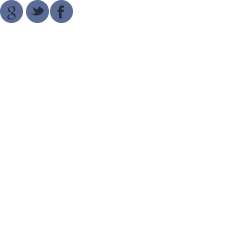
<style>
.page{position:relative;width:250px;height:250px;background:#ffffff}
.page>*{position:absolute;margin:0}
.t1{font:18px "JustVector";color:#262c44}
.t2{font:18px "JustVector";color:#262c44;text-transform:uppercase}
</style>
<div class="page">
<p class="t1" style="left:7px;top:6px;width:9px;height:14px">g</p>
<p class="t1" style="left:30px;top:6px;width:15px;height:10px">t</p>
<p class="t2" style="left:57px;top:5px;width:7px;height:14px">f</p>
</div>
